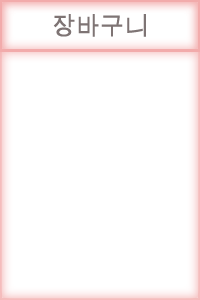
<style>
.page{position:relative;width:200px;height:300px;background:#ffffff}
.page>*{position:absolute;margin:0}
.t1{font:24.6px "ArialUnicodeMS";color:#7e7474}
</style>
<div class="page">
<p class="t1" style="left:53px;top:14px;width:93px;height:23px">장바구니</p>
</div>
